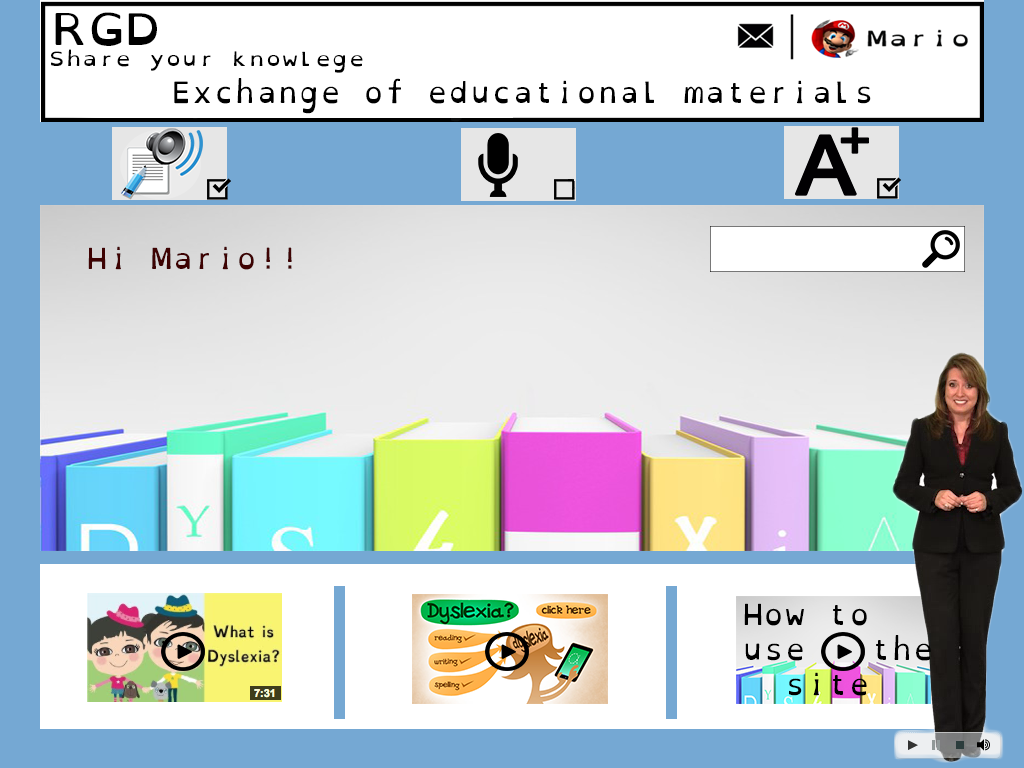
<style>
.page{position:relative;width:1024px;height:768px;background:#ffffff}
.page>*{position:absolute;margin:0}
.t1{font:43.9px "OpenDyslexicMono-Regular";color:#000000;scale:1.14 1}
.t2{font:19.3px "OpenDyslexicMono-Regular";color:#000000;scale:1.18 1}
.t3{font:29.2px "OpenDyslexicMono-Regular";color:#000000}
.t4{font:29.2px "OpenDyslexicMono-Regular";color:#3e0303}
</style>
<div class="page">
<p class="t1" style="left:55px;top:12px;width:102px;height:34px">RGD</p>
<p class="t2" style="left:51px;top:49px;width:312px;height:24px">Share your knowlege</p>
<p class="t3" style="left:174px;top:78px;width:697px;height:36px">Exchange of educational materials</p>
<p class="t4" style="left:88px;top:246px;width:204px;height:24px">Hi Mario!!</p>
<p class="t3" style="left:744px;top:603px;width:187px;height:93px">How to<br>use   the <br>  site</p>
</div>
